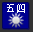
<style>
.page{position:relative;width:33px;height:32px;background:#000090}
.page>*{position:absolute;margin:0}
.t1{font:10.4px "SimSun";color:#ffffff}
</style>
<div class="page">
<p class="t1" style="left:7px;top:4px;width:18px;height:9px">五四</p>
</div>
